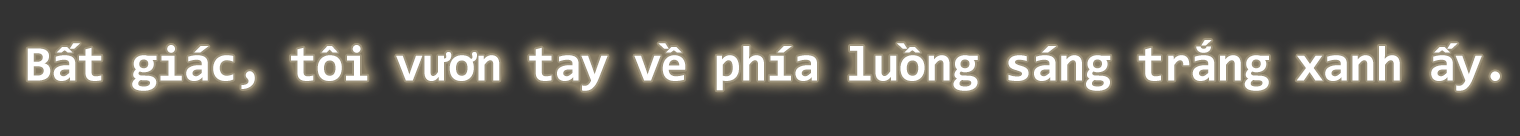
<style>
.page{position:relative;width:1520px;height:136px;background:#333333}
.page>*{position:absolute;margin:0}
.t1{font:50px "Consolas-Bold";letter-spacing:-0.02em;color:#fefefe}
</style>
<div class="page">
<p class="t1" style="left:27px;top:40px;width:1473px;height:51px">Bất giác, tôi vươn tay về phía luồng sáng trắng xanh ấy.</p>
</div>
